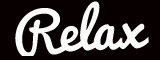
<style>
.page{position:relative;width:160px;height:60px;background:#080000}
.page>*{position:absolute;margin:0}
.t1{font:52.7px "Pacifico";color:#fcfbfb}
</style>
<div class="page">
<p class="t1" style="left:15px;top:1px;width:134px;height:55px;rotate:-2deg">Relax</p>
</div>
